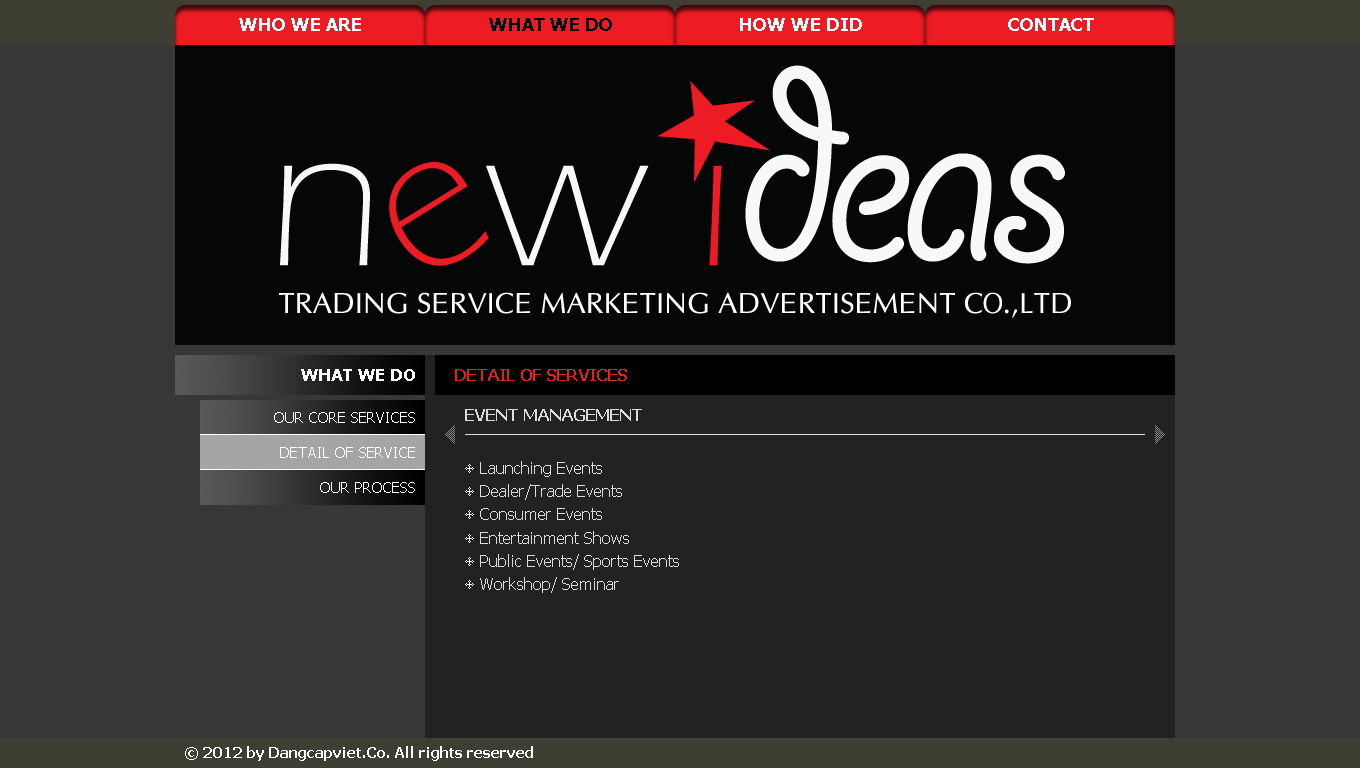
<style>
.page{position:relative;width:1360px;height:768px;background:#383636}
.page>*{position:absolute;margin:0}
.t1{font:18px "Tahoma-Bold";color:#ffffff}
.t2{font:18px "Tahoma-Bold";color:#000000}
.t3{font:17px "Tahoma-Bold";color:#ffffff}
.t4{font:16px "Tahoma-Bold";color:#ed1c24}
.t5{font:15px "Tahoma";color:#ffffff}
.t6{font:16px "Tahoma-Bold";color:#dcdcdc}
.t7{font:16px "Tahoma";color:#dcdcdc}
.t8{font:15px "Tahoma-Bold";color:#ffffff}
</style>
<div class="page">
<p class="t1" style="left:239px;top:18px;width:122px;height:13px">WHO WE ARE</p>
<p class="t2" style="left:489px;top:18px;width:123px;height:13px">WHAT WE DO</p>
<p class="t1" style="left:740px;top:18px;width:122px;height:13px">HOW WE DID</p>
<p class="t1" style="left:1008px;top:18px;width:86px;height:13px">CONTACT</p>
<p class="t3" style="left:301px;top:369px;width:114px;height:12px">WHAT WE DO</p>
<p class="t4" style="left:455px;top:369px;width:172px;height:12px">DETAIL OF SERVICES</p>
<p class="t5" style="left:274px;top:412px;width:141px;height:11px">OUR CORE SERVICES</p>
<p class="t6" style="left:465px;top:409px;width:177px;height:12px">EVENT MANAGEMENT</p>
<p class="t5" style="left:280px;top:447px;width:135px;height:11px">DETAIL OF SERVICE</p>
<p class="t7" style="left:480px;top:461px;width:199px;height:132px">Launching Events<br>Dealer/Trade Events<br>Consumer Events<br>Entertainment Shows<br>Public Events/ Sports Events<br>Workshop/ Seminar</p>
<p class="t5" style="left:320px;top:482px;width:95px;height:11px">OUR PROCESS</p>
<p class="t8" style="left:185px;top:746px;width:348px;height:15px">© 2012 by Dangcapviet.Co. All rights reserved</p>
</div>
